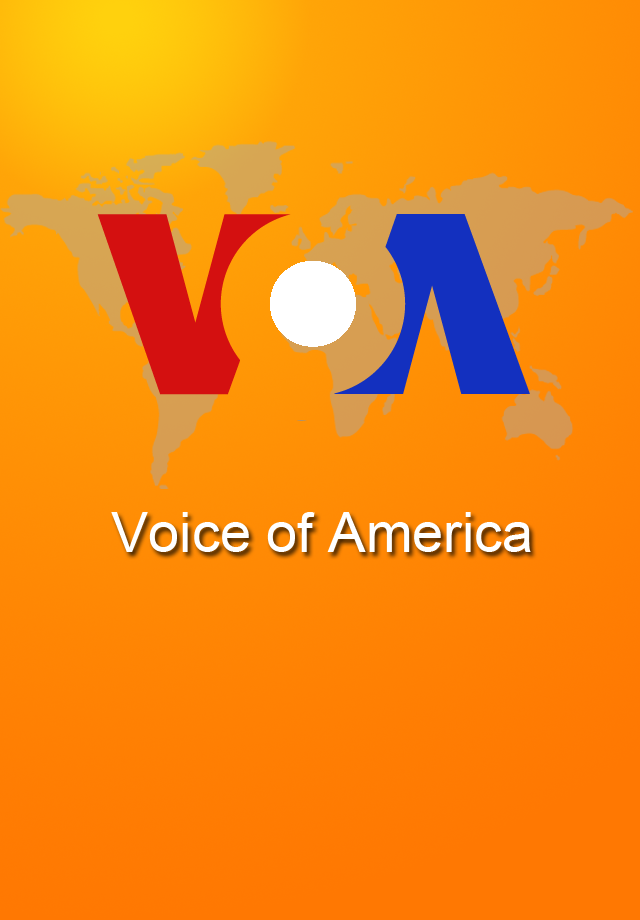
<style>
.page{position:relative;width:640px;height:920px}
.page>*{position:absolute;margin:0}
.t1{font:55.9px "ArialMT";color:#ffffff}
</style>
<div class="page">
<p class="t1" style="left:111px;top:512px;width:420px;height:40px">Voice of America</p>
</div>
